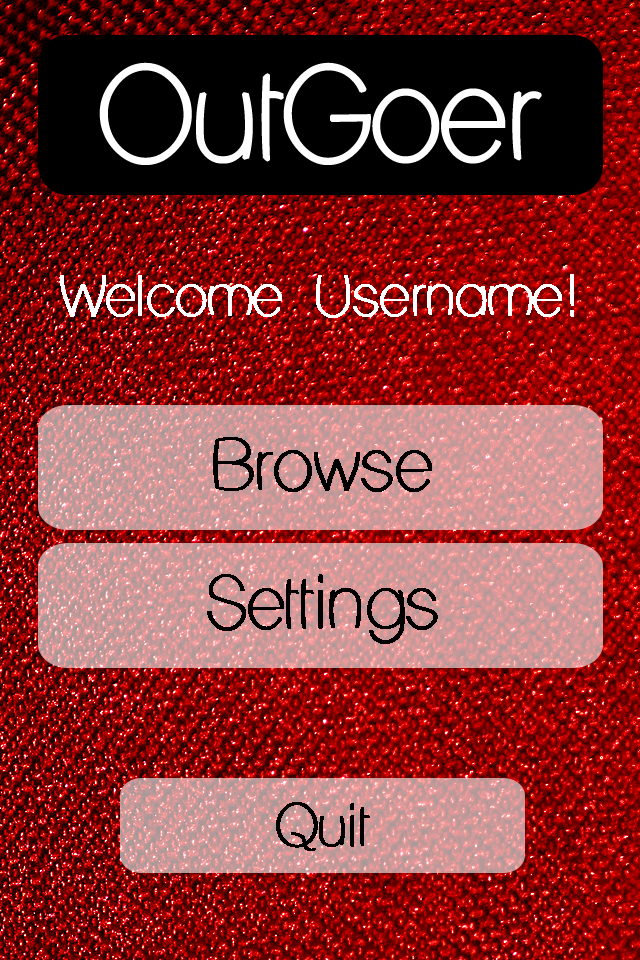
<style>
.page{position:relative;width:640px;height:960px}
.page>*{position:absolute;margin:0}
.t1{font:54.2px "LaneHumouresque";color:#ffffff;font-weight:bold}
.t2{font:68.1px "LaneHumouresque";color:#000000;font-weight:bold}
.t3{font:54.2px "LaneHumouresque";color:#000000;font-weight:bold}
</style>
<div class="page">
<p class="t1" style="left:60px;top:274px;width:514px;height:44px">Welcome Username!</p>
<p class="t2" style="left:213px;top:437px;width:219px;height:55px">Browse</p>
<p class="t2" style="left:207px;top:574px;width:231px;height:70px">Settings</p>
<p class="t3" style="left:276px;top:802px;width:94px;height:49px">Quit</p>
</div>
